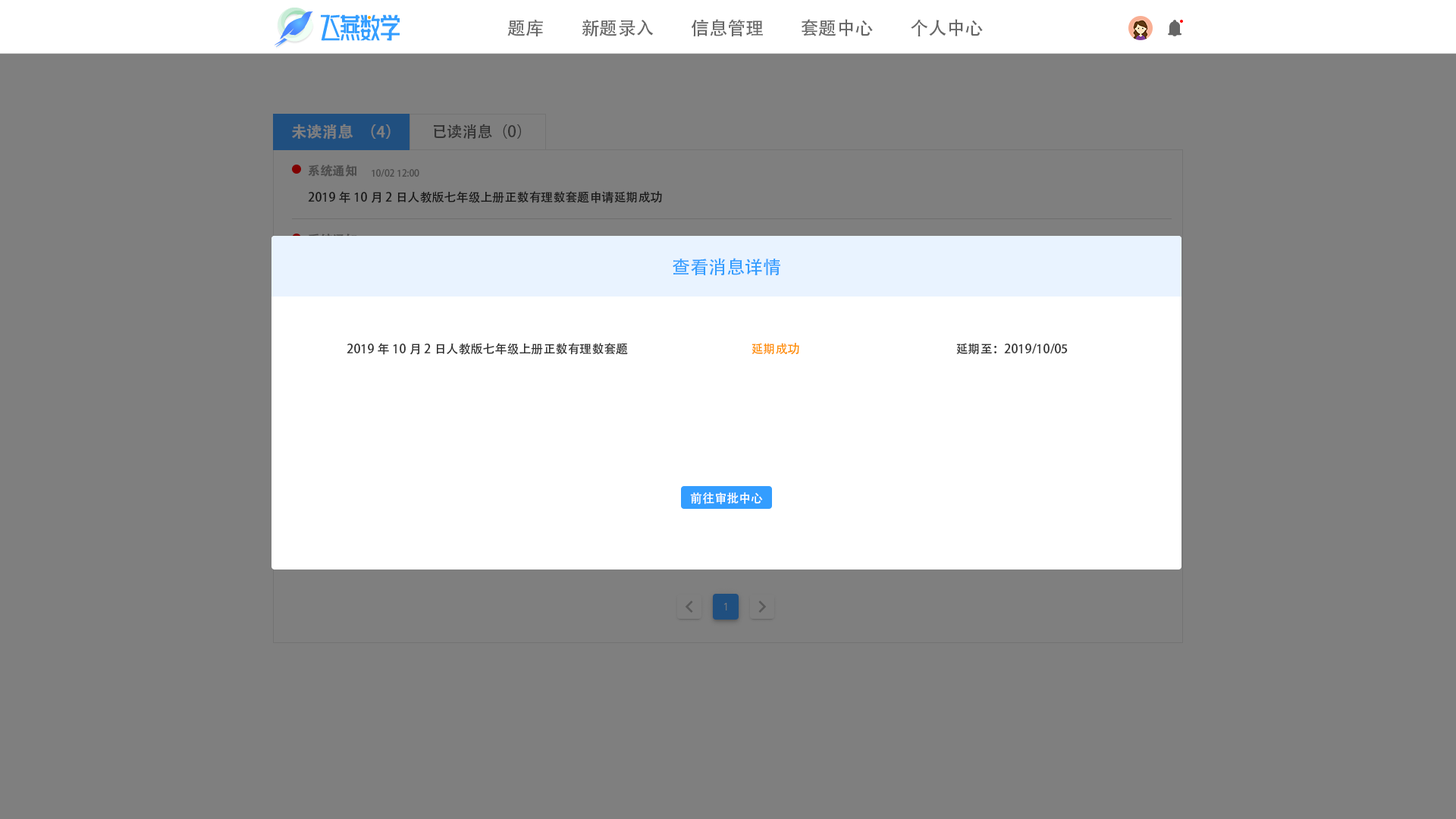
<style>
.page{position:relative;width:1456px;height:819px;background:#7f7f7f}
.page>*{position:absolute;margin:0}
.t1{font:18.2px "AdobeHeitiStd-Regular";color:#666666}
.t2{font:15.2px "AdobeHeitiStd-Regular";color:#7f7f7f;font-weight:bold}
.t3{font:15.2px "AdobeHeitiStd-Regular";color:#333333}
.t4{font:12.1px "AdobeHeitiStd-Regular";color:#4c4c4c;font-weight:bold}
.t5{font:9.1px "AdobeHeitiStd-Regular";color:#4c4c4c}
.t6{font:12.1px "AdobeHeitiStd-Regular";color:#191919}
.t7{font:18.2px "AdobeHeitiStd-Regular";color:#339dff}
.t8{font:12.1px "AdobeHeitiStd-Regular";color:#333333}
.t9{font:12.1px "AdobeHeitiStd-Regular";color:#fe9002}
.t10{font:12.1px "AdobeHeitiStd-Regular";color:#ffffff}
</style>
<div class="page">
<p class="t1" style="left:507px;top:20px;width:36px;height:16px">题库</p>
<p class="t1" style="left:582px;top:20px;width:72px;height:16px">新题录入</p>
<p class="t1" style="left:691px;top:19px;width:72px;height:18px">信息管理</p>
<p class="t1" style="left:802px;top:19px;width:71px;height:17px">套题中心</p>
<p class="t1" style="left:911px;top:19px;width:72px;height:17px">个人中心</p>
<p class="t2" style="left:292px;top:124px;width:99px;height:16px">未读消息（4）</p>
<p class="t3" style="left:434px;top:124px;width:87px;height:15px">已读消息（0）</p>
<p class="t4" style="left:308px;top:165px;width:49px;height:12px">系统通知</p>
<p class="t5" style="left:372px;top:169px;width:47px;height:8px">10/02 12:00</p>
<p class="t6" style="left:308px;top:191px;width:354px;height:12px">2019年10月2日人教版七年级上册正数有理数套题申请延期成功</p>
<p class="t7" style="left:673px;top:258px;width:107px;height:17px">查看消息详情</p>
<p class="t8" style="left:347px;top:343px;width:281px;height:12px">2019年10月2日人教版七年级上册正数有理数套题</p>
<p class="t9" style="left:751px;top:343px;width:48px;height:12px">延期成功</p>
<p class="t8" style="left:956px;top:343px;width:112px;height:11px">延期至：2019/10/05</p>
<p class="t10" style="left:690px;top:492px;width:73px;height:12px">前往审批中心</p>
</div>
